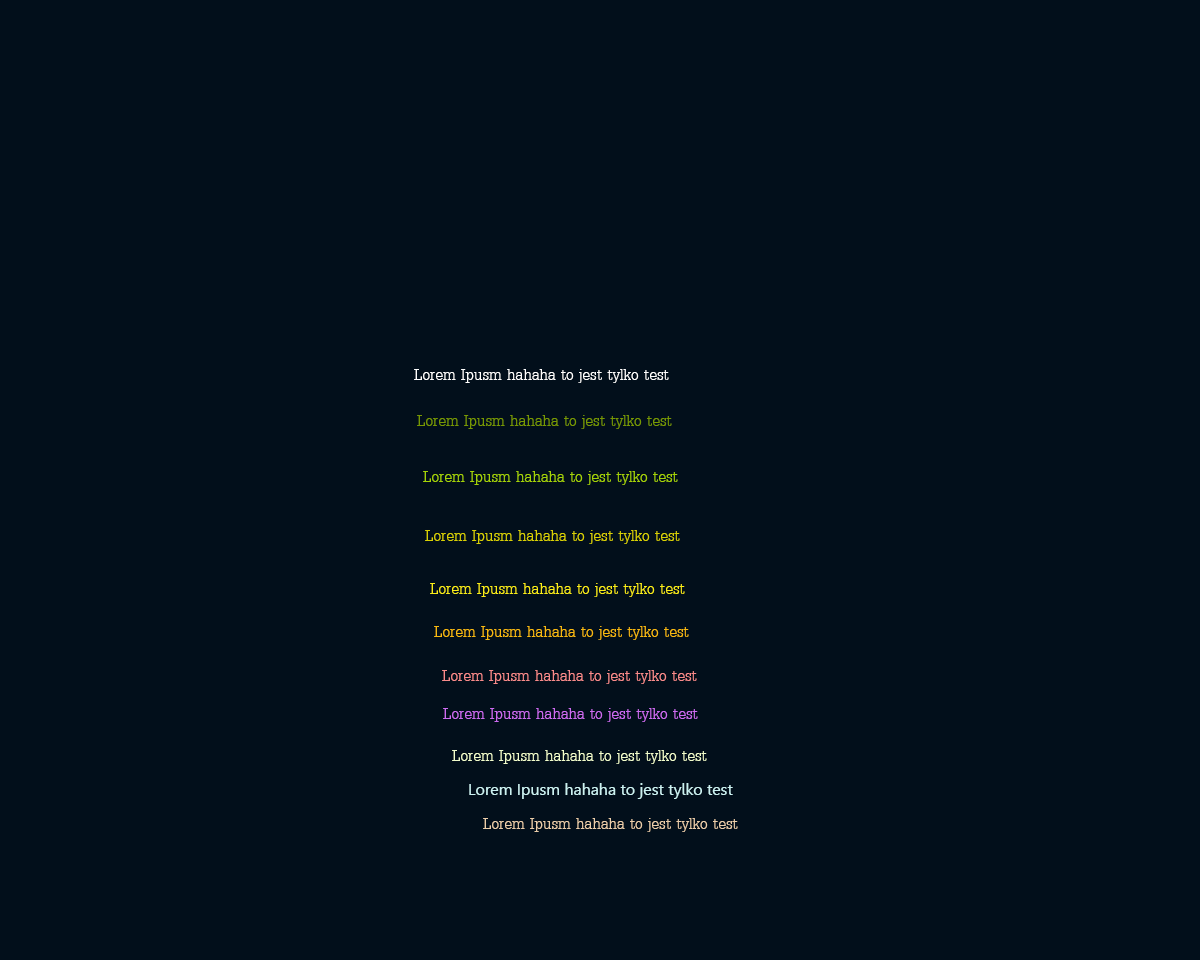
<style>
.page{position:relative;width:1200px;height:960px;background:#020f1b}
.page>*{position:absolute;margin:0}
.t1{font:24px "DilleniaUPC";color:#ffffff}
.t2{font:24px "DilleniaUPC";color:#779802}
.t3{font:24px "DilleniaUPC";color:#a4d206}
.t4{font:24px "DilleniaUPC";color:#d9d103}
.t5{font:24px "DilleniaUPC";color:#faed17}
.t6{font:24px "DilleniaUPC";color:#f8b910}
.t7{font:24px "DilleniaUPC";color:#f98b8b}
.t8{font:24px "DilleniaUPC";color:#cd6cf1}
.t9{font:24px "DilleniaUPC";color:#f2fdcc}
.t10{font:16px "Leelawadee";color:#cbf1f1}
.t11{font:24px "DilleniaUPC";color:#ebceab}
</style>
<div class="page">
<p class="t1" style="left:414px;top:369px;width:255px;height:14px">Lorem Ipusm hahaha to jest tylko test</p>
<p class="t2" style="left:417px;top:415px;width:255px;height:14px">Lorem Ipusm hahaha to jest tylko test</p>
<p class="t3" style="left:423px;top:471px;width:255px;height:14px">Lorem Ipusm hahaha to jest tylko test</p>
<p class="t4" style="left:425px;top:530px;width:255px;height:14px">Lorem Ipusm hahaha to jest tylko test</p>
<p class="t5" style="left:430px;top:583px;width:255px;height:14px">Lorem Ipusm hahaha to jest tylko test</p>
<p class="t6" style="left:434px;top:626px;width:255px;height:14px">Lorem Ipusm hahaha to jest tylko test</p>
<p class="t7" style="left:442px;top:670px;width:255px;height:14px">Lorem Ipusm hahaha to jest tylko test</p>
<p class="t8" style="left:443px;top:708px;width:255px;height:14px">Lorem Ipusm hahaha to jest tylko test</p>
<p class="t9" style="left:452px;top:750px;width:255px;height:14px">Lorem Ipusm hahaha to jest tylko test</p>
<p class="t10" style="left:469px;top:783px;width:264px;height:16px">Lorem Ipusm hahaha to jest tylko test</p>
<p class="t11" style="left:483px;top:818px;width:255px;height:14px">Lorem Ipusm hahaha to jest tylko test</p>
</div>
